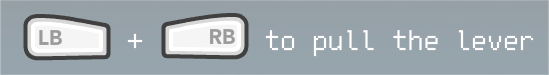
<style>
.page{position:relative;width:549px;height:75px}
.page>*{position:absolute;margin:0}
.t1{font:31.9px "FreePixel-Regular";color:#ffffff}
</style>
<div class="page">
<p class="t1" style="left:265px;top:30px;width:269px;height:27px">to pull the lever</p>
<p class="t1" style="left:127px;top:33px;width:16px;height:16px">+</p>
</div>
